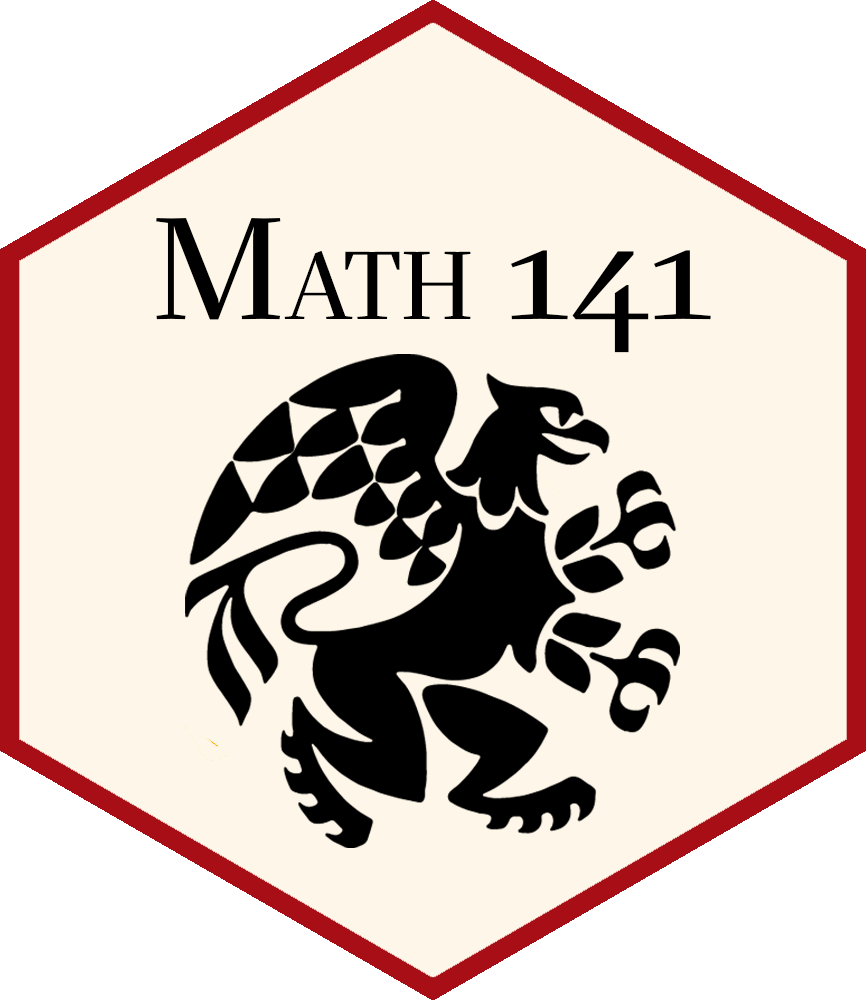
<style>
.page{position:relative;width:866px;height:1000px;background:#fef7e9}
.page>*{position:absolute;margin:0}
.t1{font:96px "GTSectraFine-Regular";color:#010000}
.t2{font:144px "GTSectraFine-Regular";color:#010000}
</style>
<div class="page">
<p class="t1" style="left:156px;top:218px;width:555px;height:135px"><span class="t2">M</span>ATH<span class="t2"> 141</span></p>
</div>
